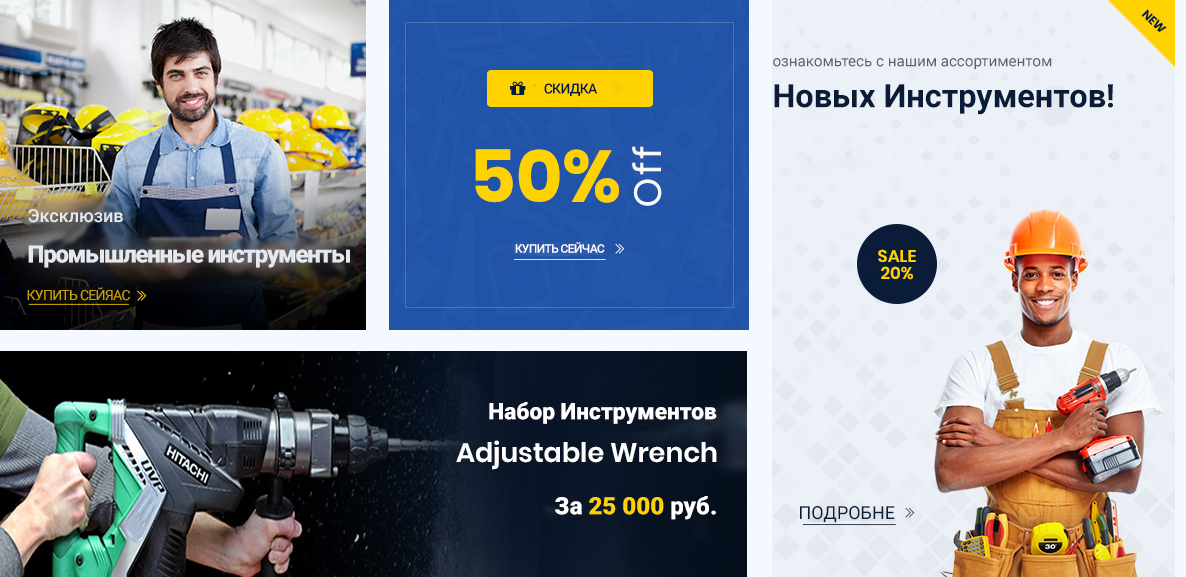
<style>
.page{position:relative;width:1186px;height:577px}
.page>*{position:absolute;margin:0}
.t1{font:15.2px "Roboto-Regular";color:#596070}
.t2{font:14px "Roboto-Medium";letter-spacing:-0.05em;color:#061a3b}
.t3{font:32.5px "Roboto-Bold";color:#0a1c38}
.t4{font:18px "Roboto-Medium";color:#e4e9ef}
.t5{font:24px "Roboto-Black";letter-spacing:-0.05em;color:#e4e9ef}
.t6{font:12px "Roboto-Medium";letter-spacing:-0.05em;color:#ffffff}
.t7{font:14px "Roboto-Regular";letter-spacing:-0.05em;color:#c8a108}
.t8{font:22.7px "Roboto-Black";color:#ffffff}
.t9{font:24.1px "Roboto-Black";color:#fdd102}
.t10{font:24.1px "Roboto-Black";color:#ffffff}
.t11{font:18px "Roboto-Regular";color:#0a1c38}
</style>
<div class="page">
<p class="t1" style="left:773px;top:58px;width:279px;height:12px">ознакомьтесь с нашим ассортиментом</p>
<p class="t2" style="left:544px;top:83px;width:54px;height:13px">СКИДКА</p>
<p class="t3" style="left:774px;top:84px;width:339px;height:31px">Новых Инструментов!</p>
<p class="t4" style="left:28px;top:209px;width:95px;height:14px">Эксклюзив</p>
<p class="t5" style="left:28px;top:245px;width:322px;height:23px">Промышленные инструменты</p>
<p class="t6" style="left:515px;top:242px;width:90px;height:11px">КУПИТЬ СЕЙЧАС</p>
<p class="t7" style="left:27px;top:287px;width:103px;height:14px">КУПИТЬ СЕЙЯАС</p>
<p class="t8" style="left:489px;top:402px;width:228px;height:22px">Набор Инструментов</p>
<p class="t9" style="left:555px;top:496px;width:161px;height:24px"><span class="t10">За </span>25 000<span class="t10"> руб.</span></p>
<p class="t11" style="left:800px;top:506px;width:95px;height:17px">ПОДРОБНЕЕ</p>
</div>
